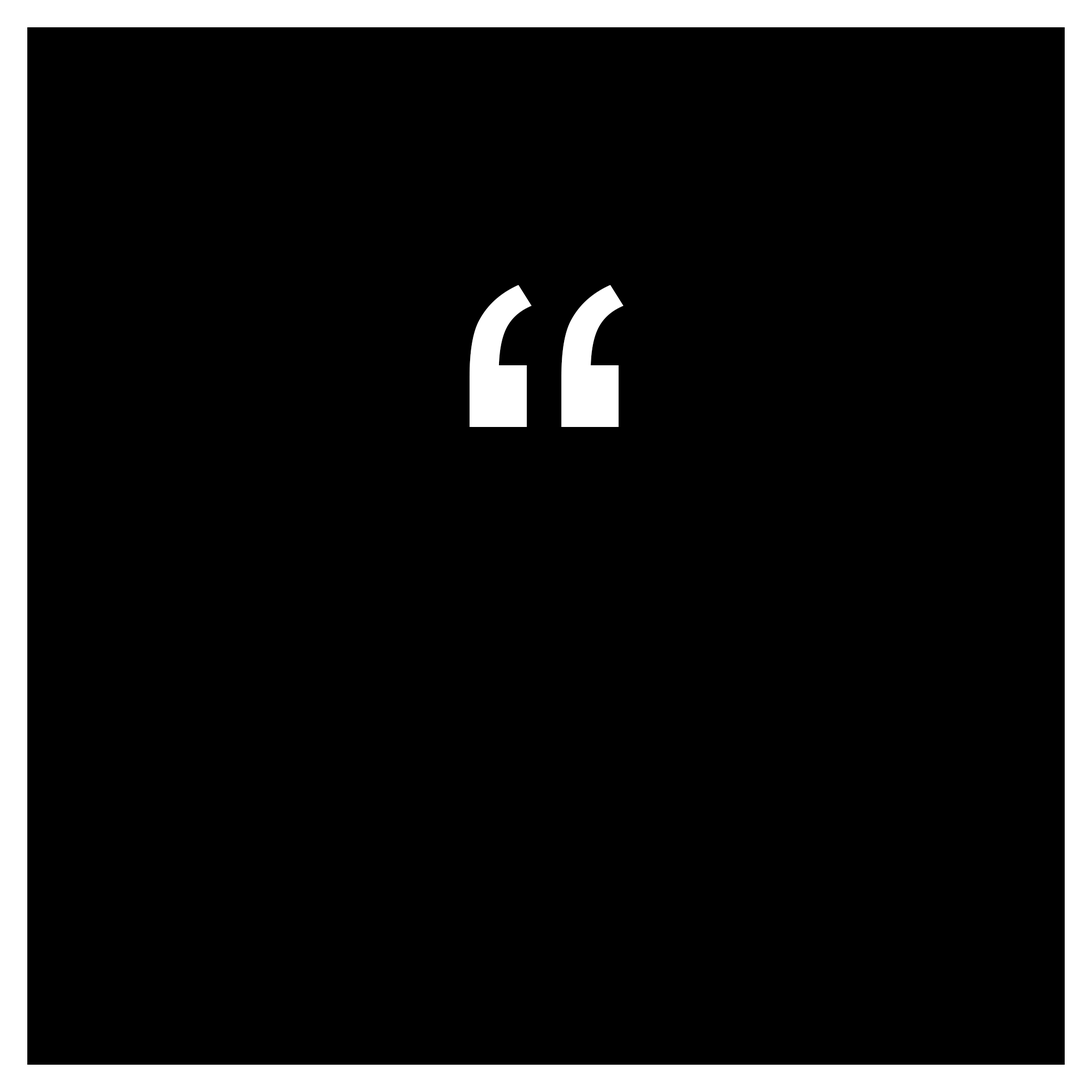
<style>
.page{position:relative;width:1092px;height:1092px;background:#000000}
.page>*{position:absolute;margin:0}
.t1{font:606.7px "ArialMT";color:#ffffff}
</style>
<div class="page">
<p class="t1" style="left:470px;top:285px;width:154px;height:142px">“</p>
</div>
